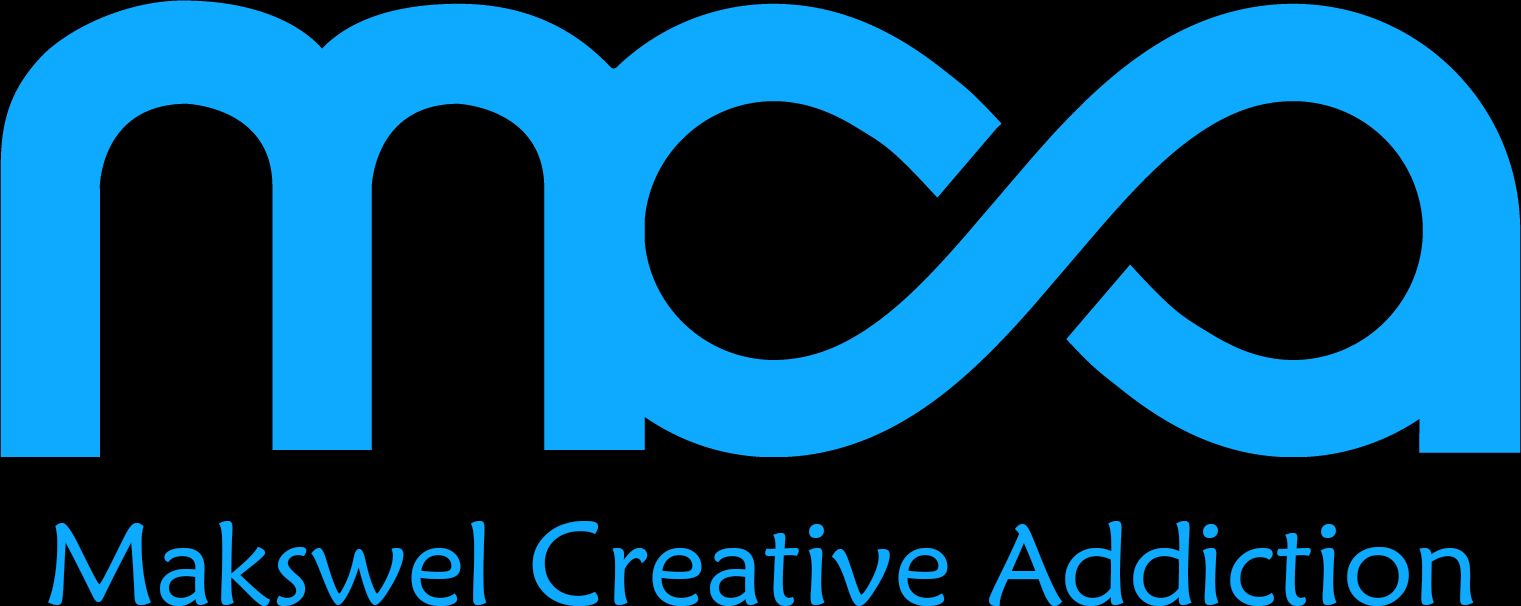
<style>
.page{position:relative;width:1521px;height:606px;background:#000000}
.page>*{position:absolute;margin:0}
.t1{font:116.7px "MaiandraGD-Regular";color:#0daaff}
</style>
<div class="page">
<p class="t1" style="left:48px;top:521px;width:1426px;height:85px">Makswel Creative Addiction</p>
</div>
